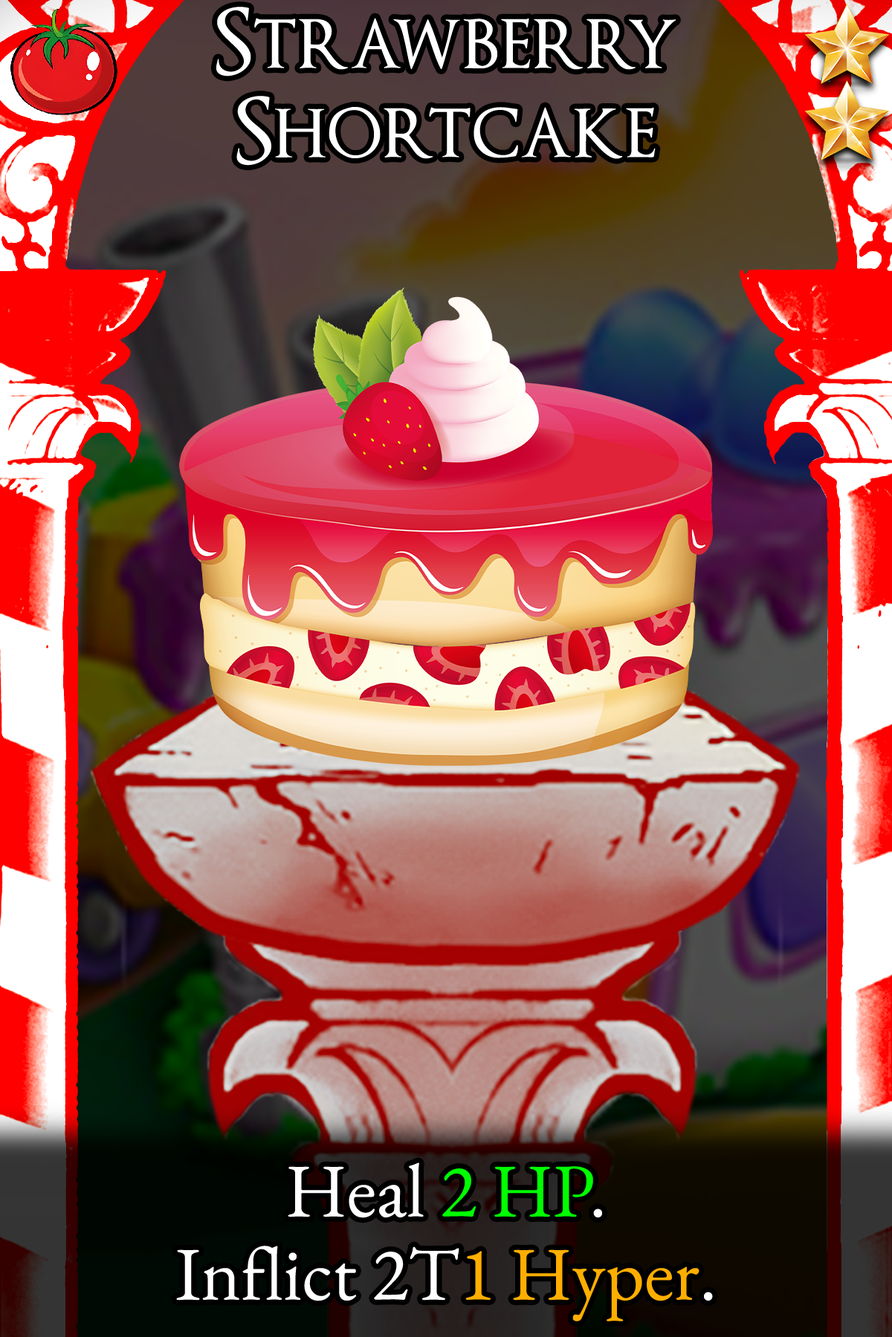
<style>
.page{position:relative;width:892px;height:1337px}
.page>*{position:absolute;margin:0}
.t1{font:152.3px/89.2px "OptimusPrinceps";color:#ffffff}
.t2{font:130px/83.2px "EBGaramond-Regular";color:#ffffff}
.t3{font:130px/83.2px "EBGaramond-Regular";color:#00ff00}
.t4{font:130px/83.2px "EBGaramond-Regular";color:#ffae00}
</style>
<div class="page">
<p class="t1" style="left:216px;top:7px;width:459px;height:159px;text-align:center">Strawberry<br>Shortcake</p>
<p class="t2" style="left:176px;top:1163px;width:537px;height:159px;text-align:center">Heal <span class="t3">2 HP</span>.<br>Inflict 2T<span class="t4">1 Hyper</span>.</p>
</div>
